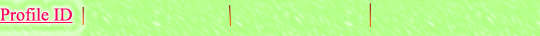
<style>
.page{position:relative;width:540px;height:36px}
.page>*{position:absolute;margin:0}
.t1{font:18px "TimesNewRomanPSMT";color:#ff015f;text-decoration:underline}
</style>
<div class="page">
<p class="t1" style="left:0px;top:7px;width:73px;height:16px">Profile ID</p>
</div>
